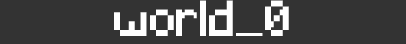
<style>
.page{position:relative;width:406px;height:44px;background:#333333}
.page>*{position:absolute;margin:0}
.t1{font:47.4px "Minecraft";color:#ffffff}
</style>
<div class="page">
<p class="t1" style="left:114px;top:0px;width:175px;height:36px">world_0</p>
</div>
